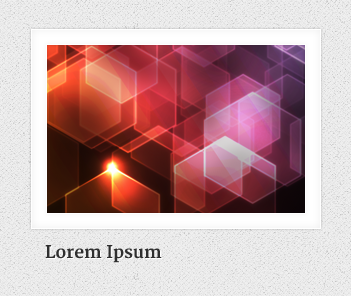
<style>
.page{position:relative;width:351px;height:296px}
.page>*{position:absolute;margin:0}
.t1{font:17px "Merriweather-Bold";color:#2f2f2f}
</style>
<div class="page">
<p class="t1" style="left:45px;top:245px;width:117px;height:18px">Lorem Ipsum</p>
</div>
